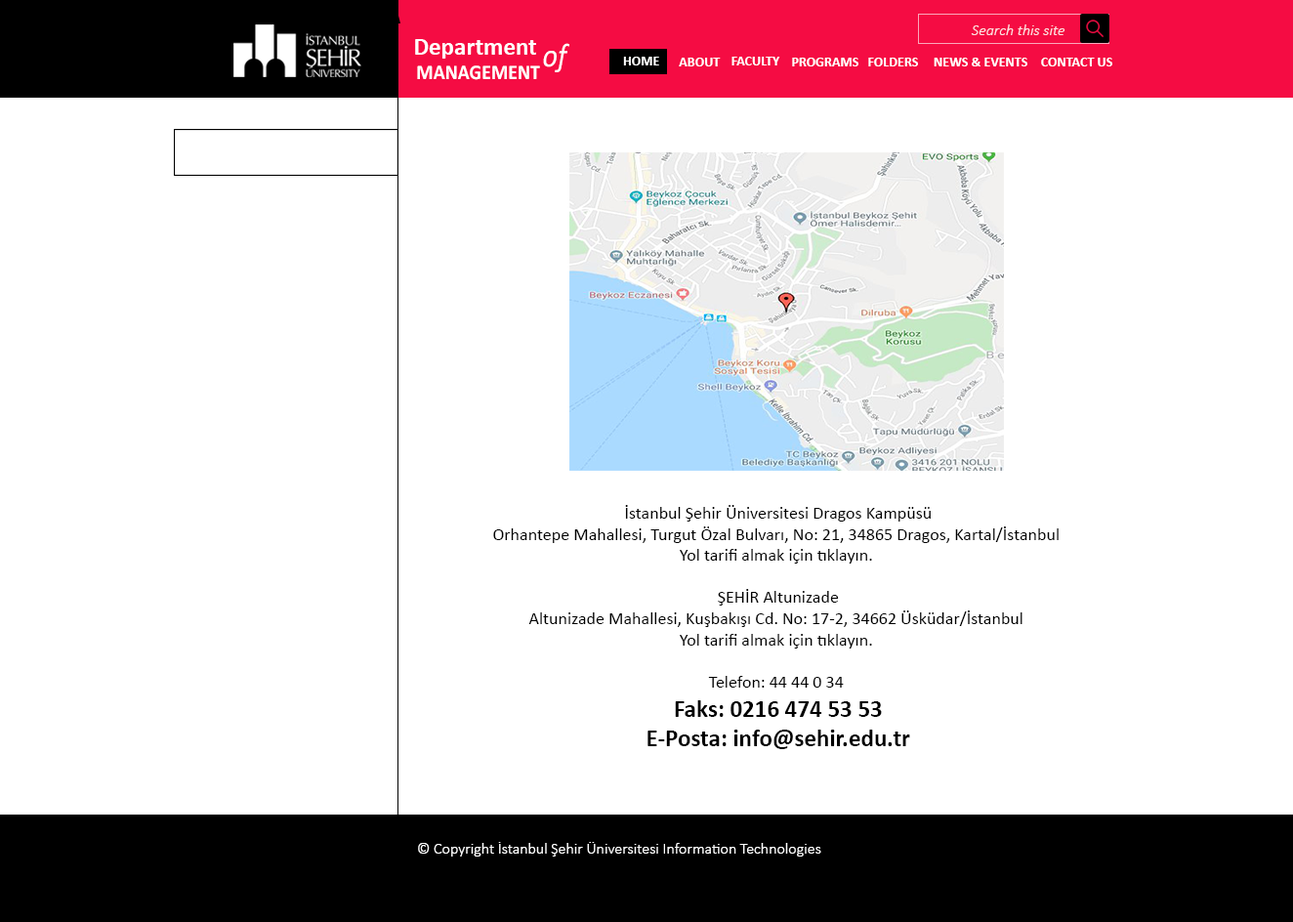
<style>
.page{position:relative;width:1293px;height:922px;background:#ffffff}
.page>*{position:absolute;margin:0}
.t1{font:15.6px "Calibri-LightItalic";color:#fddee2}
.t2{font:24.4px "Calibri-Bold";color:#ffffff}
.t3{font:33.2px "Calibri-Italic";color:#ffffff;scale:0.89 1}
.t4{font:21.1px "Calibri-Bold";color:#ffffff;scale:0.92 1}
.t5{font:13.7px "Calibri-Bold";color:#ffffff}
.t6{font:17.6px "Calibri";color:#000000}
.t7{font:24.4px "Calibri-Bold";color:#000000}
.t8{font:15.6px "Calibri-Light";color:#ffffff}
</style>
<div class="page">
<p class="t1" style="left:971px;top:24px;width:95px;height:11px">Search this site</p>
<p class="t2" style="left:415px;top:39px;width:121px;height:20px">Department</p>
<p class="t3" style="left:543px;top:43px;width:26px;height:29px">of</p>
<p class="t4" style="left:417px;top:65px;width:123px;height:15px">MANAGEMENT</p>
<p class="t5" style="left:623px;top:57px;width:36px;height:8px">HOME</p>
<p class="t5" style="left:679px;top:58px;width:42px;height:8px">ABOUT</p>
<p class="t5" style="left:732px;top:57px;width:48px;height:8px">FACULTY</p>
<p class="t5" style="left:792px;top:58px;width:67px;height:8px">PROGRAMS</p>
<p class="t5" style="left:868px;top:58px;width:50px;height:8px">FOLDERS</p>
<p class="t5" style="left:934px;top:58px;width:94px;height:8px">NEWS &amp; EVENTS</p>
<p class="t5" style="left:1041px;top:58px;width:72px;height:8px">CONTACT US</p>
<p class="t6" style="left:493px;top:505px;width:566px;height:244px;text-align:center">İstanbul Şehir Üniversitesi Dragos Kampüsü<br>Orhantepe Mahallesi, Turgut Özal Bulvarı, No: 21, 34865 Dragos, Kartal/İstanbul <br>Yol tarifi almak için tıklayın.​ <br><br>ŞEHİR Altunizade<br>Altunizade Mahallesi, Kuşbakışı Cd. No: 17-2, 34662 Üsküdar/İstanbul <br>Yol tarifi almak için tıklayın. <br>​<br>Telefon: 44 44 0 34 <span class="t7"><br>Faks: 0216 474 53 53<br>E-Posta: info@sehir.edu.tr</span></p>
<p class="t8" style="left:418px;top:842px;width:403px;height:15px">© Copyright İstanbul Şehir Üniversitesi Information Technologies</p>
</div>
